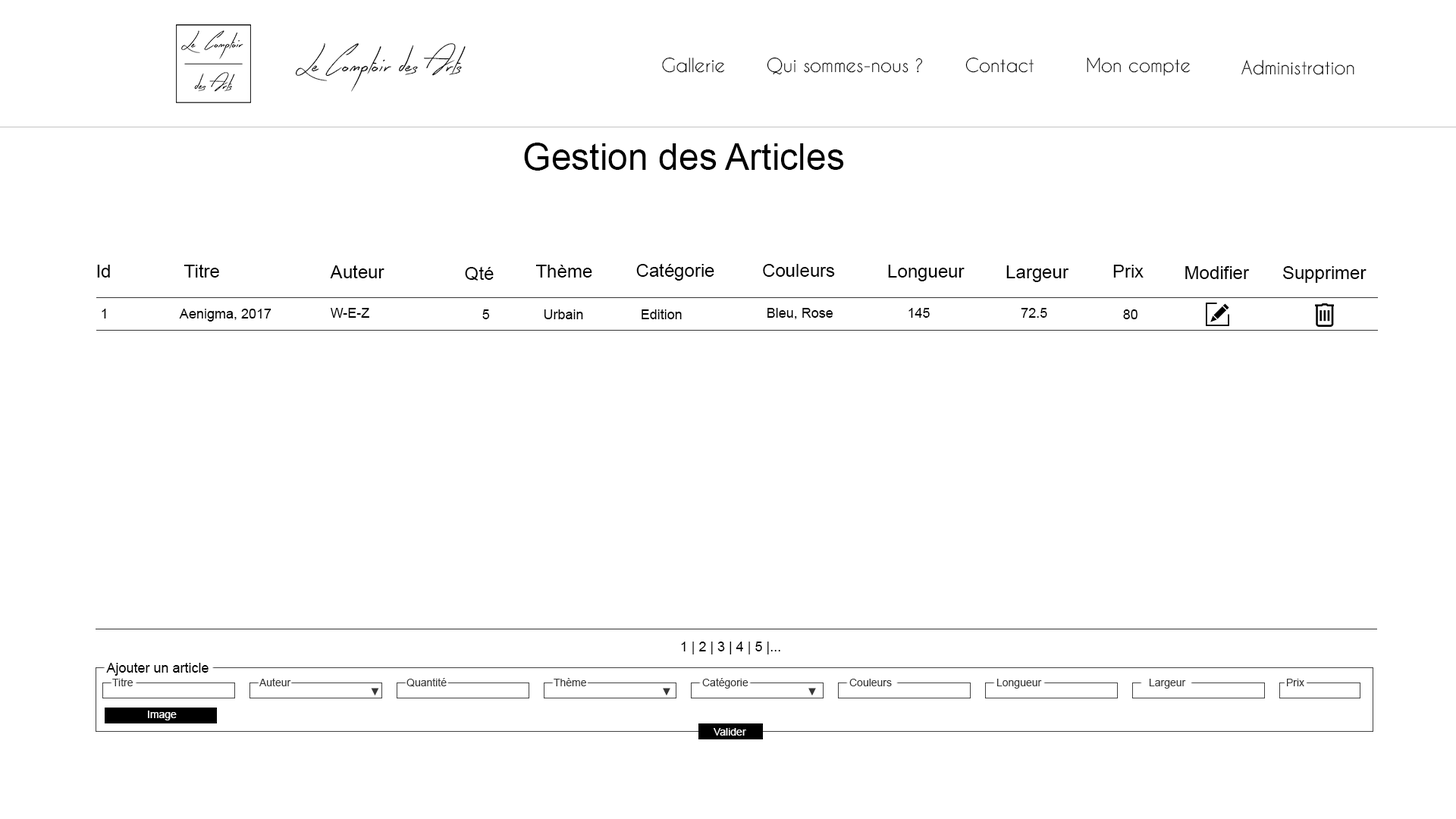
<style>
.page{position:relative;width:1456px;height:819px;background:#ffffff}
.page>*{position:absolute;margin:0}
.t1{font:33.4px "EarlyBird";color:#000000}
.t2{font:18.2px "CaviarDreams";color:#000000}
.t3{font:36.4px "ArialMT";color:#000000}
.t4{font:18.2px "ArialMT";color:#000000}
.t5{font:13.6px "ArialMT";color:#000000}
.t6{font:10.6px "ArialMT";color:#363636}
.t7{font:10.6px "ArialMT";color:#ffffff}
</style>
<div class="page">
<p class="t1" style="left:295px;top:43px;width:171px;height:49px">Le Comptoir des Arts</p>
<p class="t2" style="left:662px;top:57px;width:63px;height:16px">Gallerie</p>
<p class="t2" style="left:767px;top:57px;width:156px;height:18px">Qui sommes-nous ?</p>
<p class="t2" style="left:965px;top:57px;width:69px;height:16px">Contact</p>
<p class="t2" style="left:1087px;top:58px;width:104px;height:18px">Mon compte</p>
<p class="t2" style="left:1241px;top:60px;width:113px;height:15px">Administration</p>
<p class="t3" style="left:524px;top:143px;width:320px;height:28px">Gestion des Articles</p>
<p class="t4" style="left:97px;top:265px;width:13px;height:13px">Id</p>
<p class="t4" style="left:184px;top:264px;width:35px;height:14px">Titre</p>
<p class="t4" style="left:330px;top:265px;width:54px;height:13px">Auteur</p>
<p class="t4" style="left:465px;top:266px;width:29px;height:15px">Qté</p>
<p class="t4" style="left:535px;top:265px;width:57px;height:13px">Thème</p>
<p class="t4" style="left:636px;top:263px;width:78px;height:18px">Catégorie</p>
<p class="t4" style="left:763px;top:264px;width:72px;height:13px">Couleurs</p>
<p class="t4" style="left:888px;top:265px;width:77px;height:16px">Longueur</p>
<p class="t4" style="left:1006px;top:265px;width:63px;height:17px">Largeur</p>
<p class="t4" style="left:1113px;top:265px;width:31px;height:13px">Prix</p>
<p class="t4" style="left:1185px;top:266px;width:65px;height:13px">Modifier</p>
<p class="t4" style="left:1283px;top:266px;width:83px;height:17px">Supprimer</p>
<p class="t5" style="left:102px;top:309px;width:4px;height:9px">1</p>
<p class="t5" style="left:179px;top:309px;width:92px;height:13px">Aenigma, 2017</p>
<p class="t5" style="left:331px;top:308px;width:38px;height:10px">W-E-Z</p>
<p class="t5" style="left:482px;top:309px;width:8px;height:10px">5</p>
<p class="t5" style="left:544px;top:309px;width:39px;height:10px">Urbain</p>
<p class="t5" style="left:642px;top:309px;width:40px;height:10px">Edition</p>
<p class="t5" style="left:767px;top:308px;width:66px;height:11px">Bleu, Rose</p>
<p class="t5" style="left:908px;top:308px;width:22px;height:10px">145</p>
<p class="t5" style="left:1021px;top:308px;width:26px;height:10px">72.5</p>
<p class="t5" style="left:1123px;top:309px;width:14px;height:10px">80</p>
<p class="t5" style="left:681px;top:642px;width:99px;height:12px">1 | 2 | 3 | 4 | 5 |...</p>
<p class="t5" style="left:106px;top:663px;width:103px;height:13px">Ajouter un article</p>
<p class="t6" style="left:112px;top:678px;width:21px;height:8px">Titre</p>
<p class="t6" style="left:259px;top:678px;width:32px;height:8px">Auteur</p>
<p class="t6" style="left:406px;top:678px;width:41px;height:9px">Quantité</p>
<p class="t6" style="left:554px;top:678px;width:32px;height:8px">Thème</p>
<p class="t6" style="left:702px;top:678px;width:46px;height:11px">Catégorie</p>
<p class="t6" style="left:371px;top:688px;width:8px;height:7px">▼</p>
<p class="t6" style="left:663px;top:688px;width:7px;height:7px">▼</p>
<p class="t6" style="left:808px;top:688px;width:8px;height:7px">▼</p>
<p class="t6" style="left:849px;top:679px;width:43px;height:7px">Couleurs</p>
<p class="t6" style="left:996px;top:679px;width:46px;height:10px">Longueur</p>
<p class="t6" style="left:1149px;top:679px;width:37px;height:10px">Largeur</p>
<p class="t6" style="left:1287px;top:679px;width:17px;height:7px">Prix</p>
<p class="t7" style="left:148px;top:711px;width:29px;height:9px">Image</p>
<p class="t7" style="left:714px;top:728px;width:32px;height:8px">Valider</p>
</div>
